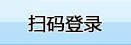
<style>
.page{position:relative;width:131px;height:45px}
.page>*{position:absolute;margin:0}
.t1{font:18px "MicrosoftYaHei";color:#000000;font-weight:bold}
</style>
<div class="page">
<p class="t1" style="left:28px;top:15px;width:74px;height:18px">扫码登录</p>
</div>
